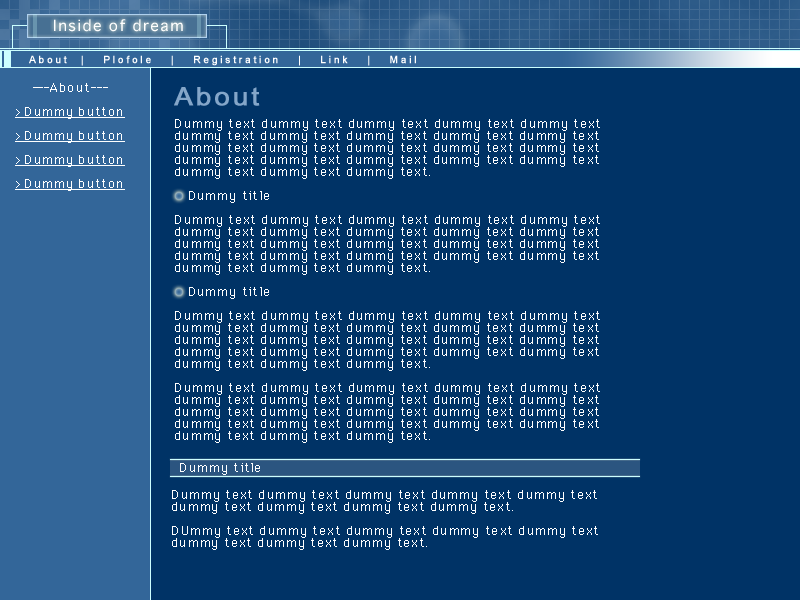
<style>
.page{position:relative;width:800px;height:600px;background:#003366}
.page>*{position:absolute;margin:0}
.t1{font:15px "Osaka";letter-spacing:0.1em;color:#ffffff}
.t2{font:10px "ArialMT";letter-spacing:0.26em;color:#ffffff;font-weight:bold}
.t3{font:12px/12px "Osaka";letter-spacing:0.1em;color:#ffffff;text-decoration:underline}
.t4{font:12px/12px "Osaka";letter-spacing:0.1em;color:#ffffff}
.t5{font:25px "ArialMT";letter-spacing:0.1em;color:#84a6c9;font-weight:bold;scale:1.1 1}
.t6{font:12px "Osaka";letter-spacing:0.1em;color:#ffffff}
</style>
<div class="page">
<p class="t1" style="left:54px;top:19px;width:129px;height:13px">Inside of dream</p>
<p class="t2" style="left:29px;top:55px;width:387px;height:11px">About  |   Plofole   |   Registration   |   Link   |   Mail</p>
<p class="t3" style="left:15px;top:83px;width:110px;height:108px;text-align:center"><span class="t4">---About---<br></span><br>&gt;Dummy button<br><br>&gt;Dummy button<br><br>&gt;Dummy button<br><br>&gt;Dummy button</p>
<p class="t5" style="left:174px;top:87px;width:86px;height:19px">About</p>
<p class="t4" style="left:175px;top:119px;width:425px;height:324px">Dummy text dummy text dummy text dummy text dummy text <br>dummy text dummy text dummy text dummy text dummy text <br>dummy text dummy text dummy text dummy text dummy text <br>dummy text dummy text dummy text dummy text dummy text <br>dummy text dummy text dummy text.<br><br>   Dummy title<br><br>Dummy text dummy text dummy text dummy text dummy text <br>dummy text dummy text dummy text dummy text dummy text <br>dummy text dummy text dummy text dummy text dummy text <br>dummy text dummy text dummy text dummy text dummy text <br>dummy text dummy text dummy text.<br><br>   Dummy title<br><br>Dummy text dummy text dummy text dummy text dummy text <br>dummy text dummy text dummy text dummy text dummy text <br>dummy text dummy text dummy text dummy text dummy text <br>dummy text dummy text dummy text dummy text dummy text <br>dummy text dummy text dummy text.<br><br>Dummy text dummy text dummy text dummy text dummy text <br>dummy text dummy text dummy text dummy text dummy text <br>dummy text dummy text dummy text dummy text dummy text <br>dummy text dummy text dummy text dummy text dummy text <br>dummy text dummy text dummy text.</p>
<p class="t6" style="left:180px;top:463px;width:80px;height:12px">Dummy title</p>
<p class="t4" style="left:172px;top:490px;width:426px;height:60px">Dummy text dummy text dummy text dummy text dummy text<br>dummy text dummy text dummy text dummy text.<br><br>DUmmy text dummy text dummy text dummy text dummy text<br>dummy text dummy text dummy text.</p>
</div>
